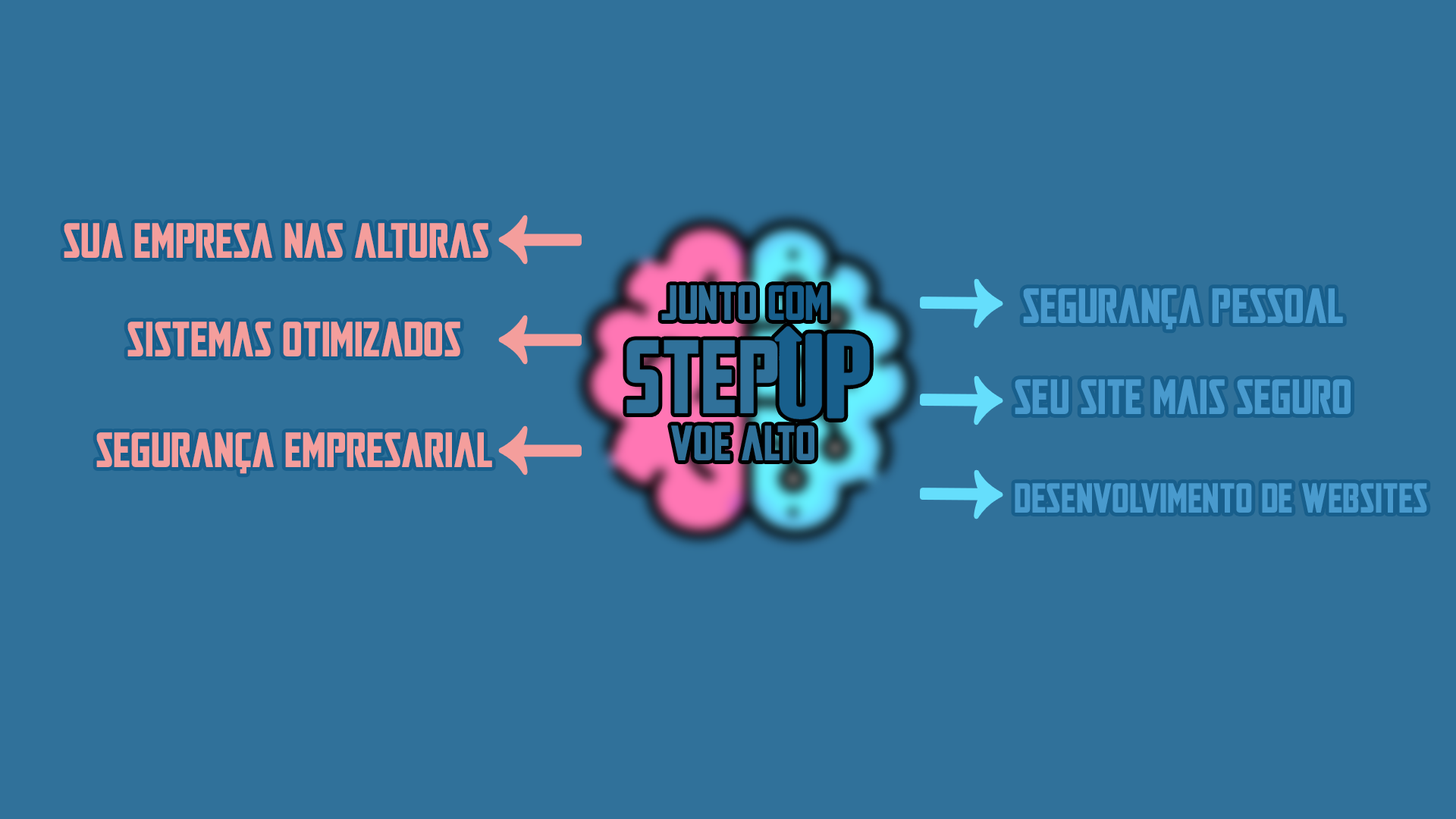
<style>
.page{position:relative;width:1456px;height:819px;background:#30719a}
.page>*{position:absolute;margin:0}
.t1{font:49.3px "Mandalore";color:#f49e9c}
.t2{font:49.3px "Mandalore";color:#30719a}
.t3{font:49.3px "Mandalore";color:#185f8c}
.t4{font:49.3px "Mandalore";color:#499acd}
.t5{font:41.7px "Mandalore";color:#499acd}
</style>
<div class="page">
<p class="t1" style="left:64px;top:223px;width:424px;height:35px">sua empresa nas alturas</p>
<p class="t2" style="left:661px;top:285px;width:166px;height:35px">Junto <span class="t3">com</span></p>
<p class="t4" style="left:1023px;top:288px;width:320px;height:42px">segurança pessoal</p>
<p class="t1" style="left:127px;top:322px;width:333px;height:34px">sistemas otimizados</p>
<p class="t4" style="left:1015px;top:379px;width:336px;height:35px">seu site mais seguro</p>
<p class="t2" style="left:671px;top:425px;width:143px;height:35px">Voe alto</p>
<p class="t1" style="left:96px;top:432px;width:396px;height:42px">segurança empresarial</p>
<p class="t5" style="left:1015px;top:483px;width:412px;height:30px">desenvolvimento de websites</p>
</div>
